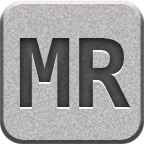
<style>
.page{position:relative;width:144px;height:144px}
.page>*{position:absolute;margin:0}
.t1{font:95.4px "Menlo-Bold";color:#444342}
</style>
<div class="page">
<p class="t1" style="left:19px;top:38px;width:112px;height:69px">MR</p>
</div>
